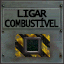
<style>
.page{position:relative;width:64px;height:64px}
.page>*{position:absolute;margin:0}
.t1{font:11.3px/10px "LucidaConsole";letter-spacing:-0.1em;color:#000000;font-weight:bold;scale:0.78 1}
.t2{font:11px/11.7px "LucidaConsole";letter-spacing:-0.1em;color:#000000;font-weight:bold}
.t3{font:11.3px/10px "LucidaConsole";letter-spacing:-0.02em;color:#000000;font-weight:bold;scale:0.78 1}
.t4{font:11.3px/10px "LucidaConsole";letter-spacing:-0.04em;color:#000000;font-weight:bold;scale:0.78 1}
</style>
<div class="page">
<p class="t1" style="left:4px;top:9px;width:55px;height:19px;text-align:center"><span class="t2">LIGAR<br></span><span class="t3">CO</span><span class="t4">M</span>BUSTÍVEL</p>
</div>
